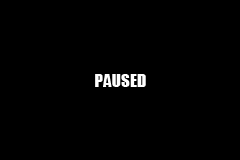
<style>
.page{position:relative;width:240px;height:160px;background:#000000}
.page>*{position:absolute;margin:0}
.t1{font:16px "Impact";color:#ffffff;text-transform:uppercase;scale:1.07 1}
</style>
<div class="page">
<p class="t1" style="left:95px;top:74px;width:51px;height:13px">PAUSED</p>
</div>
